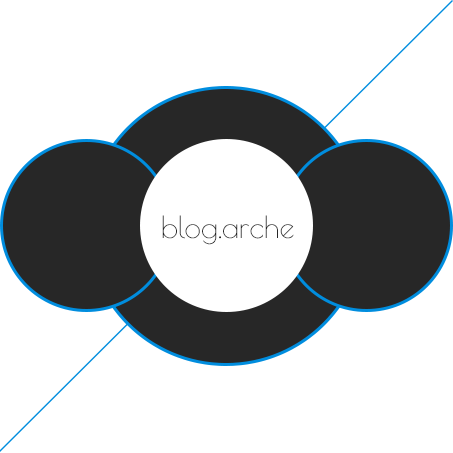
<style>
.page{position:relative;width:453px;height:453px;background:#ffffff}
.page>*{position:absolute;margin:0}
.t1{font:30px "PoiretOne-Regular";color:#272727}
</style>
<div class="page">
<p class="t1" style="left:162px;top:215px;width:132px;height:30px">blog.arche</p>
</div>
